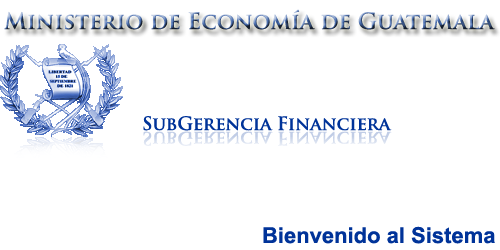
<style>
.page{position:relative;width:500px;height:250px;background:#ffffff}
.page>*{position:absolute;margin:0}
.t1{font:22px "TrajanPro-Bold"}
.t2{font:18px "TrajanPro-Bold";color:#003399}
.t3{font:22px "Arial-BoldMT";color:#003399}
</style>
<div class="page">
<p class="t1" style="left:4px;top:9px;width:491px;height:21px">Ministerio de Economía de Guatemala</p>
<p class="t2" style="left:143px;top:116px;width:249px;height:15px">SubGerencia Financiera</p>
<p class="t3" style="left:263px;top:226px;width:232px;height:18px">Bienvenido al Sistema</p>
</div>
